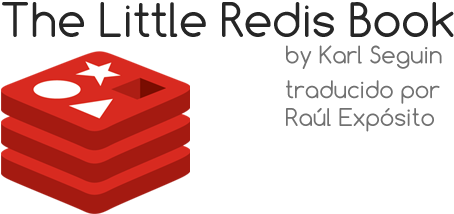
<style>
.page{position:relative;width:454px;height:214px;background:#ffffff}
.page>*{position:absolute;margin:0}
.t1{font:50px "Comfortaa";color:#262626}
.t2{font:23px "Comfortaa";color:#717171}
</style>
<div class="page">
<p class="t1" style="left:2px;top:2px;width:452px;height:35px">The Little Redis Book</p>
<p class="t2" style="left:286px;top:45px;width:156px;height:87px">by Karl Seguin<br> <br>traducido por<br>Raúl Expósito</p>
</div>
